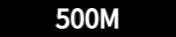
<style>
.page{position:relative;width:176px;height:37px;background:#000000}
.page>*{position:absolute;margin:0}
.t1{font:26px "WebPSD-18463539-0-Regular";color:#ffffff;font-weight:bold}
</style>
<div class="page">
<p class="t1" style="left:0px;top:0px;width:176px;height:37px">500M</p>
</div>
